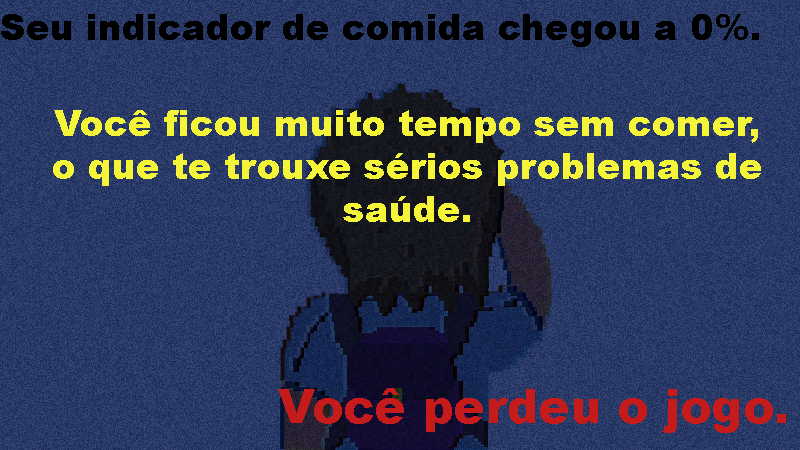
<style>
.page{position:relative;width:800px;height:450px}
.page>*{position:absolute;margin:0}
.t1{font:36px "Arial-Black";color:#000000}
.t2{font:36px "Arial-Black";color:#f4f439}
.t3{font:36px/80px "Arial-Black";color:#f4f439}
.t4{font:47.2px "Arial-Black";color:#c61b1b}
</style>
<div class="page">
<p class="t1" style="left:1px;top:14px;width:758px;height:33px">Seu indicador de comida chegou a 0%.</p>
<p class="t2" style="left:53px;top:110px;width:708px;height:112px;text-align:center"><span class="t3">Você ficou muito tempo sem comer,</span><br>o que te trouxe sérios problemas de saúde.</p>
<p class="t4" style="left:278px;top:388px;width:508px;height:45px">Você perdeu o jogo.</p>
</div>
